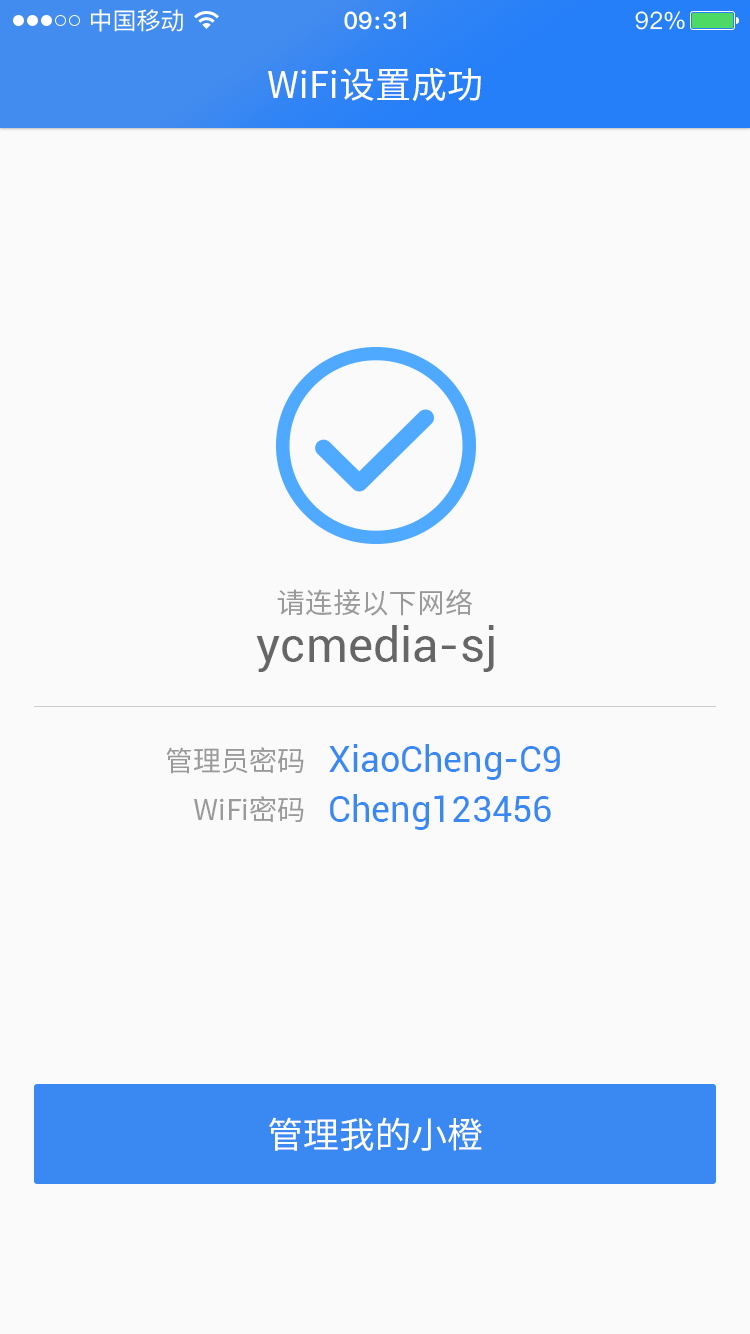
<style>
.page{position:relative;width:750px;height:1334px;background:#fafafa}
.page>*{position:absolute;margin:0}
.t1{font:36px "SourceHanSansCN-Regular";color:#ffffff}
.t2{font:28px "SourceHanSansCN-Regular";color:#999999}
.t3{font:48px "Roboto-Regular";color:#666666}
.t4{font:36px "Roboto-Regular";color:#3a88f2}
</style>
<div class="page">
<p class="t1" style="left:268px;top:68px;width:213px;height:34px">WiFi设置成功</p>
<p class="t2" style="left:277px;top:589px;width:195px;height:27px">请连接以下网络</p>
<p class="t3" style="left:256px;top:625px;width:238px;height:47px">ycmedia-sj</p>
<p class="t2" style="left:166px;top:747px;width:138px;height:27px">管理员密码</p>
<p class="t4" style="left:329px;top:744px;width:231px;height:36px">XiaoCheng-C9</p>
<p class="t2" style="left:194px;top:796px;width:110px;height:26px">WiFi密码</p>
<p class="t4" style="left:330px;top:794px;width:221px;height:36px">Cheng123456</p>
<p class="t1" style="left:269px;top:1117px;width:213px;height:34px">管理我的小橙</p>
</div>
